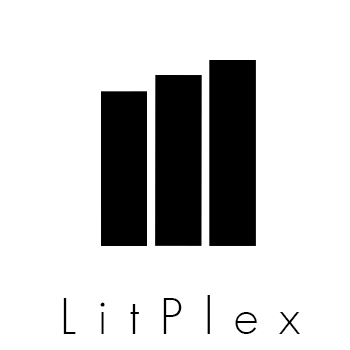
<style>
.page{position:relative;width:350px;height:350px;background:#ffffff}
.page>*{position:absolute;margin:0}
.t1{font:47.7px "FuturaLight";letter-spacing:0.44em;color:#000000}
</style>
<div class="page">
<p class="t1" style="left:63px;top:295px;width:237px;height:39px">LitPlex</p>
</div>
